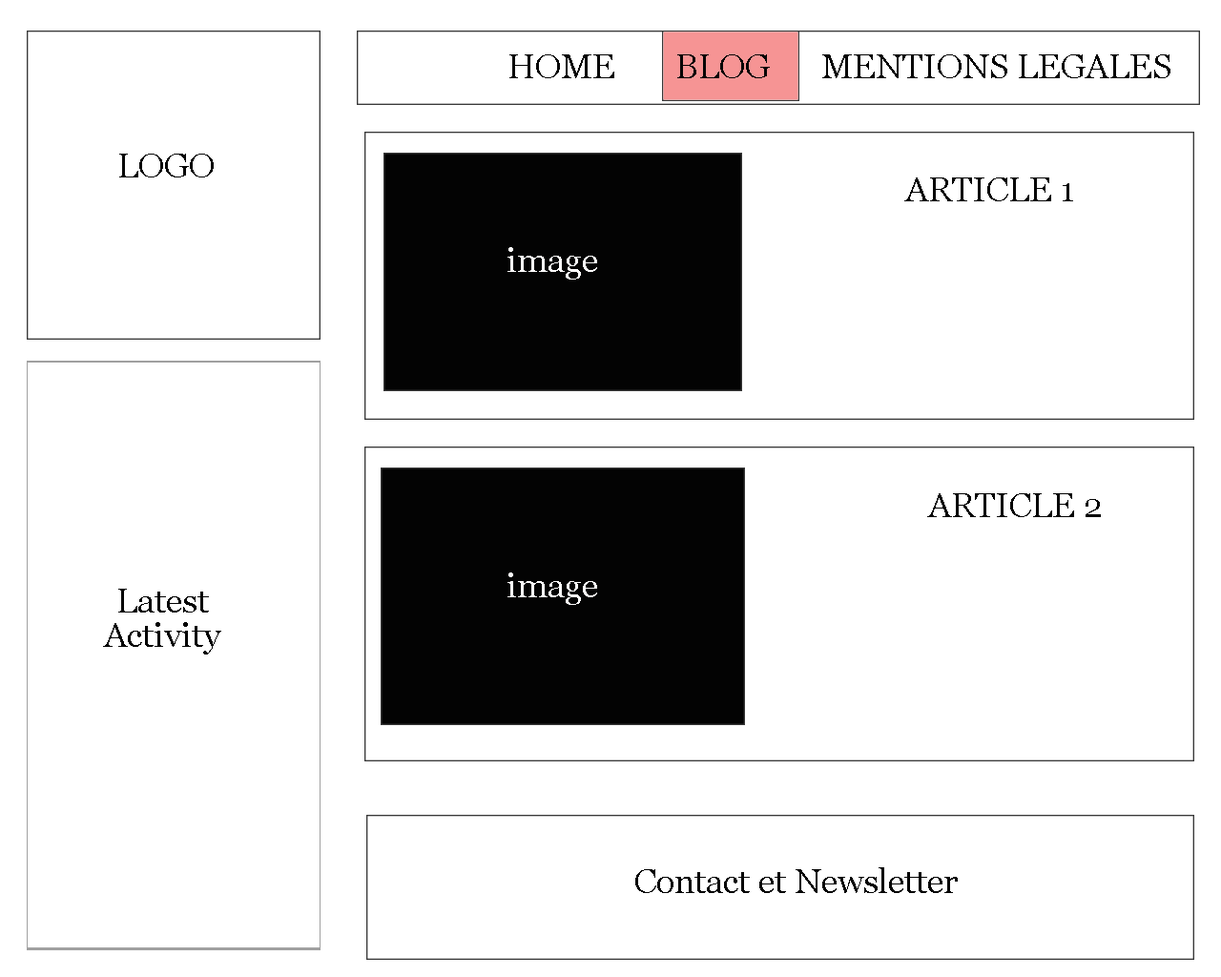
<style>
.page{position:relative;width:1221px;height:977px;background:#ffffff}
.page>*{position:absolute;margin:0}
.t1{font:34.3px "Georgia";color:#050505}
.t2{font:34.3px "Georgia";color:#030303}
.t3{font:34.3px "Georgia";color:#fdfcfc}
.t4{font:34.3px/34.3px "Georgia";color:#030303}
</style>
<div class="page">
<p class="t1" style="left:509px;top:54px;width:661px;height:24px">HOME       BLOG      MENTIONS LEGALES</p>
<p class="t1" style="left:119px;top:154px;width:95px;height:23px">LOGO</p>
<p class="t2" style="left:904px;top:177px;width:169px;height:24px">ARTICLE 1</p>
<p class="t3" style="left:507px;top:247px;width:90px;height:32px">image</p>
<p class="t2" style="left:927px;top:493px;width:174px;height:24px">ARTICLE 2</p>
<p class="t3" style="left:507px;top:572px;width:90px;height:33px">image</p>
<p class="t4" style="left:103px;top:589px;width:118px;height:65px;text-align:center">Latest<br>Activity</p>
<p class="t2" style="left:635px;top:867px;width:323px;height:26px">Contact et Newsletter</p>
</div>
